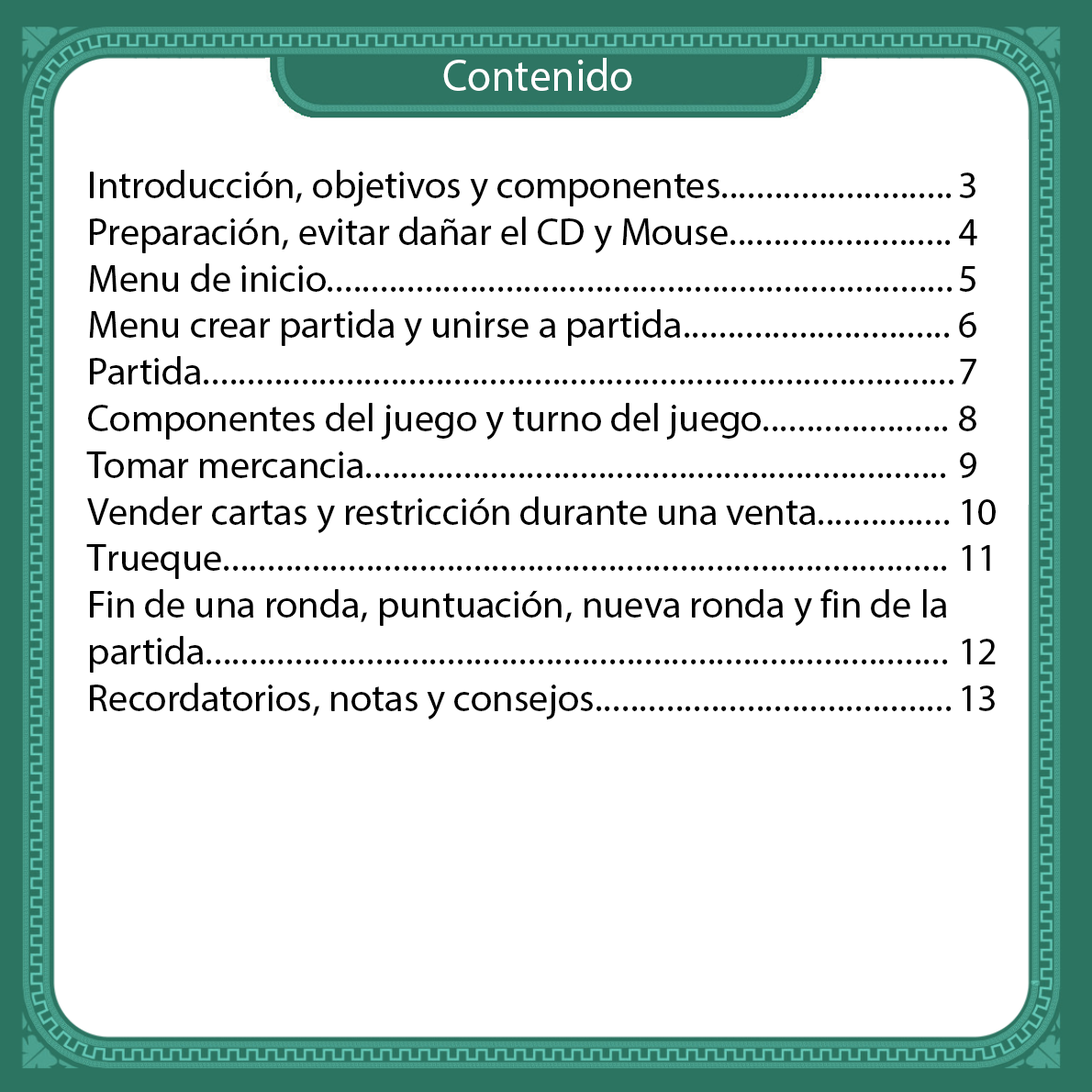
<style>
.page{position:relative;width:1092px;height:1092px;background:#ffffff}
.page>*{position:absolute;margin:0}
.t1{font:45.3px "MyriadHebrew-Regular";color:#ffffff;scale:0.96 1}
.t2{font:38.8px "MyriadHebrew-Regular";color:#000000}
.t3{font:11px "MyriadHebrew-Regular";color:#000000}
</style>
<div class="page">
<p class="t1" style="left:443px;top:58px;width:189px;height:33px">Contenido</p>
<p class="t2" style="left:86px;top:170px;width:868px;height:549px;text-align:right">Introducción, objetivos y componentes..........................<br>Preparación, evitar dañar el CD y Mouse.........................<br>Menu de inicio......................................................................<br>Menu crear partida y unirse a partida..............................<br>Partida....................................................................................<br>Componentes del juego y turno del juego.....................<br>Tomar mercancia.................................................................<br>Vender cartas y restricción durante una venta...............<br>Trueque.................................................................................<br>Fin de una ronda, puntuación, nueva ronda y fin de la partida...................................................................................<br>Recordatorios, notas y consejos........................................</p>
<p class="t3" style="left:959px;top:173px;width:37px;height:538px;text-align:right">3<br>4<br>5<br>6<br>7<br>8<br>9<br>10<br>11<br><br>12<br>13</p>
</div>
